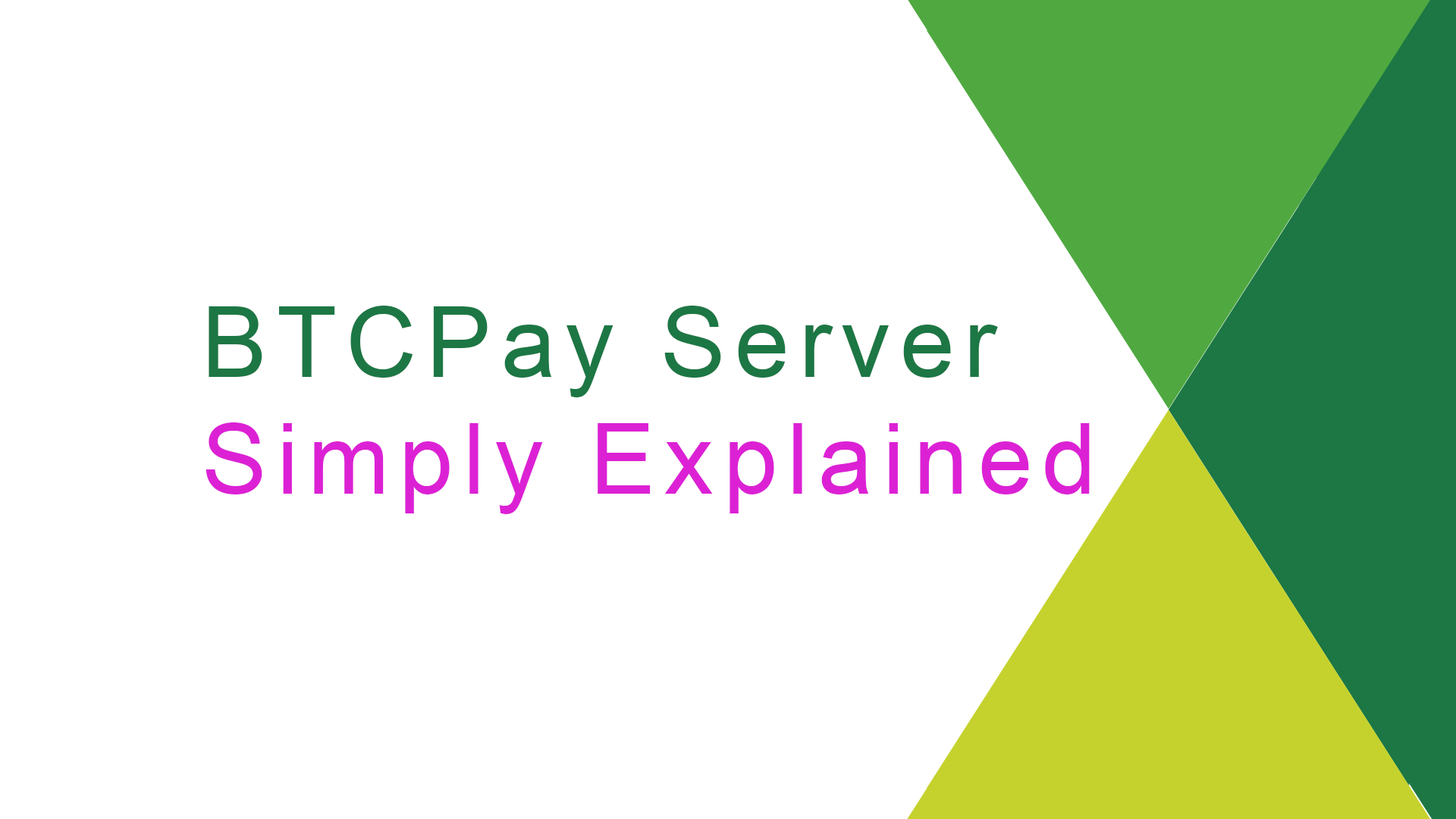
<style>
.page{position:relative;width:1456px;height:819px;background:#ffffff}
.page>*{position:absolute;margin:0}
.t1{font:97.5px "ArialMT";letter-spacing:0.1em;color:#dc21d5}
.t2{font:97.5px "ArialMT";letter-spacing:0.1em;color:#1c7744}
</style>
<div class="page">
<p class="t1" style="left:206px;top:306px;width:884px;height:208px"><span class="t2">BTCPay Server<br></span>Simply Explained</p>
</div>
